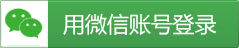
<style>
.page{position:relative;width:239px;height:48px}
.page>*{position:absolute;margin:0}
.t1{font:22px "MicrosoftYaHei";color:#ffffff}
</style>
<div class="page">
<p class="t1" style="left:63px;top:13px;width:154px;height:22px">用微信账号登录</p>
</div>
